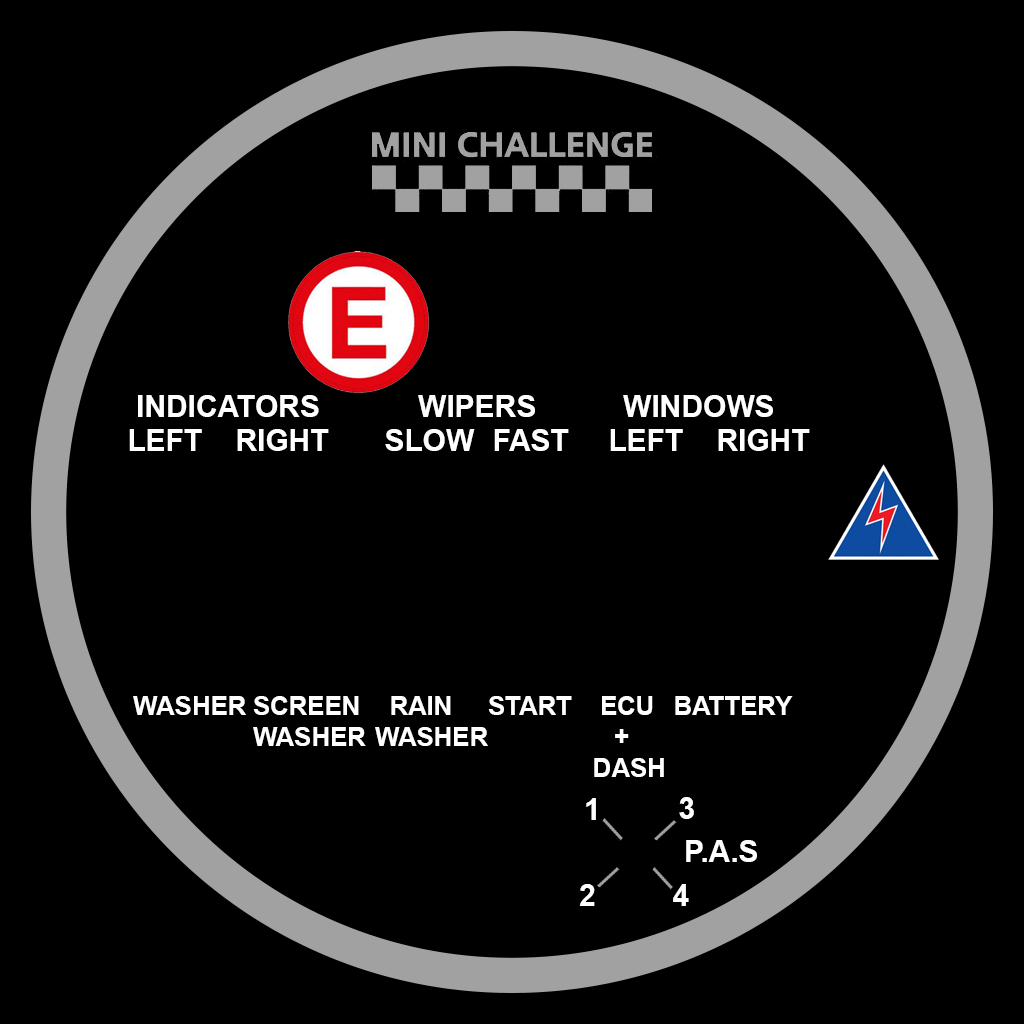
<style>
.page{position:relative;width:1024px;height:1024px;background:#000000}
.page>*{position:absolute;margin:0}
.t1{font:30px "Arial-BoldMT";color:#ffffff}
.t2{font:25.7px "Arial-BoldMT";color:#ffffff}
</style>
<div class="page">
<p class="t1" style="left:138px;top:395px;width:181px;height:22px">INDICATORS</p>
<p class="t1" style="left:418px;top:395px;width:117px;height:22px">WIPERS</p>
<p class="t1" style="left:623px;top:395px;width:150px;height:22px">WINDOWS</p>
<p class="t1" style="left:129px;top:429px;width:200px;height:22px">LEFT RIGHT</p>
<p class="t1" style="left:385px;top:429px;width:184px;height:22px">SLOW FAST</p>
<p class="t1" style="left:610px;top:429px;width:200px;height:22px">LEFT RIGHT</p>
<p class="t2" style="left:133px;top:696px;width:113px;height:19px">WASHER</p>
<p class="t2" style="left:253px;top:696px;width:113px;height:50px">SCREEN<br>WASHER</p>
<p class="t2" style="left:375px;top:696px;width:113px;height:50px">RAIN<br>WASHER</p>
<p class="t2" style="left:488px;top:696px;width:84px;height:19px">START</p>
<p class="t2" style="left:594px;top:696px;width:70px;height:81px">ECU<br>   +<br>DASH</p>
<p class="t2" style="left:675px;top:696px;width:118px;height:19px">BATTERY</p>
<p class="t1" style="left:586px;top:798px;width:10px;height:22px">1</p>
<p class="t1" style="left:679px;top:797px;width:15px;height:22px">3</p>
<p class="t1" style="left:686px;top:840px;width:71px;height:22px">P.A.S</p>
<p class="t1" style="left:579px;top:884px;width:16px;height:22px">2</p>
<p class="t1" style="left:673px;top:884px;width:16px;height:22px">4</p>
</div>
